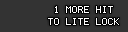
<style>
.page{position:relative;width:128px;height:32px;background:#333333}
.page>*{position:absolute;margin:0}
.t1{font:8px/12px "Terminal";color:#ffffff}
</style>
<div class="page">
<p class="t1" style="left:48px;top:6px;width:71px;height:19px;text-align:center">1 MORE HIT<br>TO LITE LOCK</p>
</div>
